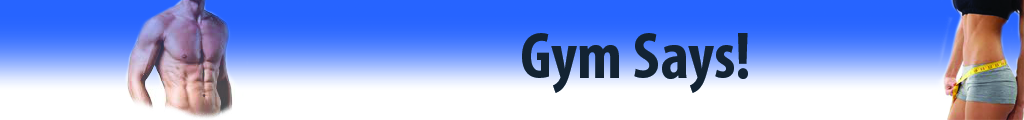
<style>
.page{position:relative;width:1024px;height:120px;background:#ffffff}
.page>*{position:absolute;margin:0}
.t1{font:66.7px "MyriadPro-BoldCond";color:#132233}
</style>
<div class="page">
<p class="t1" style="left:522px;top:33px;width:226px;height:60px">Gym Says!</p>
</div>
